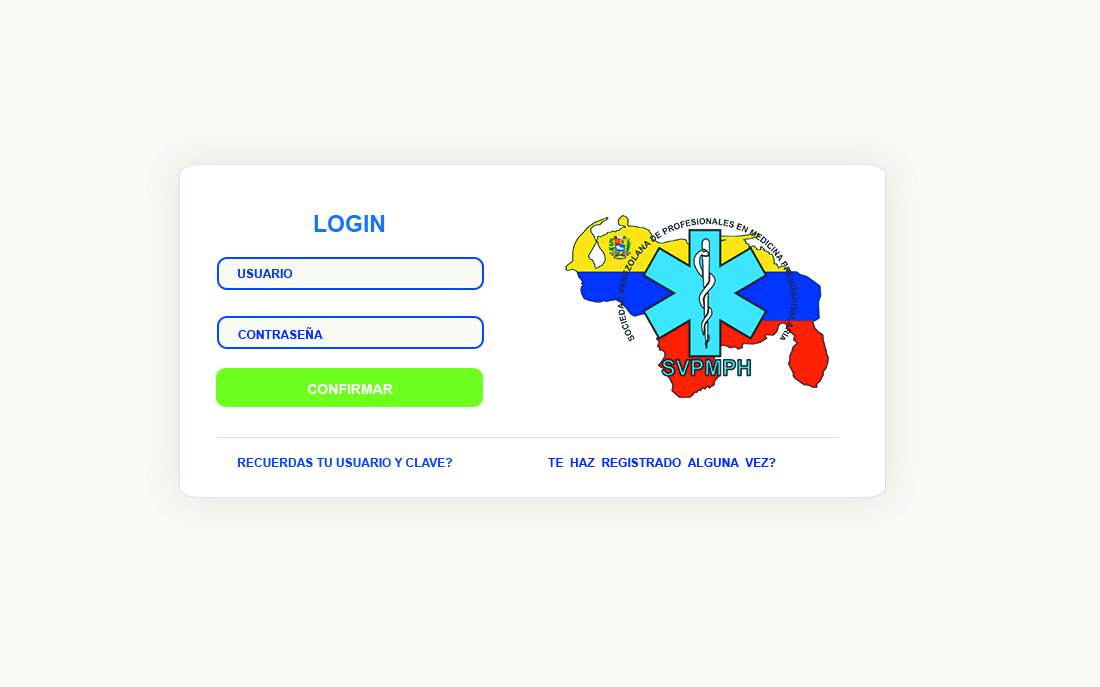
<style>
.page{position:relative;width:1100px;height:687px;background:#f8faf4}
.page>*{position:absolute;margin:0}
.t1{font:23px "Arial-BoldMT";color:#1874ff;text-transform:uppercase}
.t2{font:12px "Arial-BoldMT";color:#0034ff;text-transform:uppercase}
.t3{font:12px "Arial-BoldMT";color:#002eff;text-transform:uppercase}
.t4{font:14px "Arial-BoldMT";color:#ffffff;text-transform:uppercase}
.t5{font:12px "Arial-BoldMT";color:#0443ff;text-transform:uppercase}
</style>
<div class="page">
<p class="t1" style="left:314px;top:215px;width:71px;height:17px">LOGIN</p>
<p class="t2" style="left:238px;top:269px;width:55px;height:9px">usuario</p>
<p class="t3" style="left:238px;top:327px;width:85px;height:12px">contraseña</p>
<p class="t4" style="left:307px;top:384px;width:86px;height:10px">confirmar</p>
<p class="t5" style="left:238px;top:458px;width:215px;height:9px">recuerdas tu usuario y clave?</p>
<p class="t3" style="left:548px;top:458px;width:228px;height:9px">te  haz  registrado  alguna  vez?</p>
</div>
